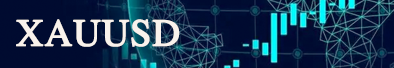
<style>
.page{position:relative;width:394px;height:68px}
.page>*{position:absolute;margin:0}
.t1{font:38.1px "Times-Roman";color:#f9f2ec;font-weight:bold}
</style>
<div class="page">
<p class="t1" style="left:16px;top:19px;width:164px;height:28px">XAUUSD</p>
</div>
